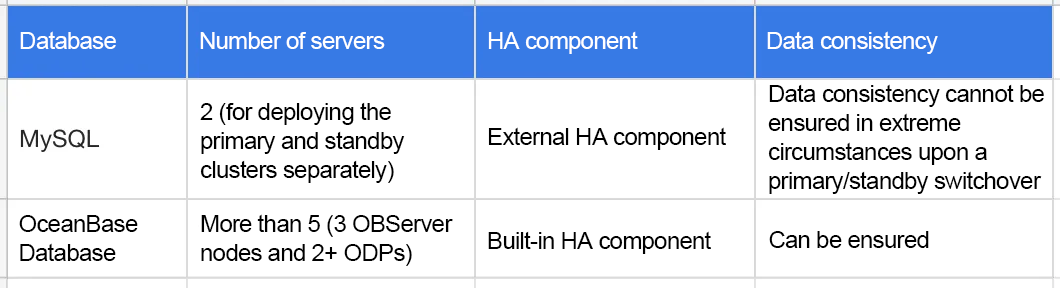
<style>
.page{position:relative;width:1060px;height:288px;background:#ffffff}
.page>*{position:absolute;margin:0}
.t1{font:24px "ArialMT";letter-spacing:-0.03em;color:#ffffff}
.t2{font:24px/29px "ArialMT";letter-spacing:-0.03em;color:#000000}
.t3{font:24px "ArialMT";letter-spacing:-0.03em;color:#000000}
</style>
<div class="page">
<p class="t1" style="left:20px;top:31px;width:96px;height:18px">Database</p>
<p class="t1" style="left:200px;top:32px;width:185px;height:17px">Number of servers</p>
<p class="t1" style="left:488px;top:31px;width:150px;height:23px">HA component</p>
<p class="t1" style="left:767px;top:31px;width:171px;height:23px">Data consistency</p>
<p class="t2" style="left:768px;top:84px;width:276px;height:110px">Data consistency cannot be ensured in extreme circumstances upon a primary/standby switchover</p>
<p class="t2" style="left:200px;top:102px;width:205px;height:81px">2 (for deploying the primary and standby clusters separately)</p>
<p class="t3" style="left:488px;top:127px;width:238px;height:23px">External HA component</p>
<p class="t2" style="left:19px;top:215px;width:119px;height:46px">OceanBase <br>Database</p>
<p class="t2" style="left:201px;top:214px;width:252px;height:52px">More than 5 (3 OBServer nodes and 2+ ODPs)</p>
<p class="t3" style="left:488px;top:231px;width:223px;height:23px">Built-in HA component</p>
<p class="t3" style="left:769px;top:231px;width:160px;height:17px">Can be ensured</p>
</div>
